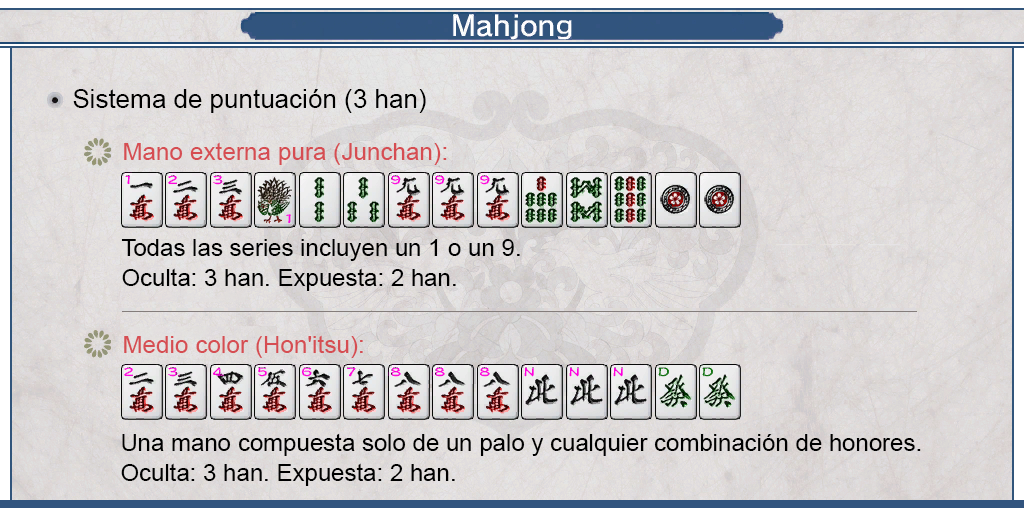
<style>
.page{position:relative;width:1024px;height:512px}
.page>*{position:absolute;margin:0}
.t1{font:26px "ArialMT";color:#000000}
.t2{font:24px "ArialMT";color:#d64d52}
.t3{font:24px/30px "ArialMT";color:#000000}
</style>
<div class="page">
<p class="t1" style="left:73px;top:89px;width:353px;height:24px">Sistema de puntuación (3 han)</p>
<p class="t2" style="left:124px;top:142px;width:323px;height:23px">Mano externa pura (Junchan):</p>
<p class="t3" style="left:121px;top:239px;width:399px;height:52px;text-align:justify">Todas las series incluyen un 1 o un 9.<br>Oculta: 3 han. Expuesta: 2 han.</p>
<p class="t2" style="left:124px;top:335px;width:239px;height:23px">Medio color (Hon'itsu):</p>
<p class="t3" style="left:121px;top:433px;width:800px;height:53px;text-align:justify">Una mano compuesta solo de un palo y cualquier combinación de honores. <br>Oculta: 3 han. Expuesta: 2 han.</p>
</div>
